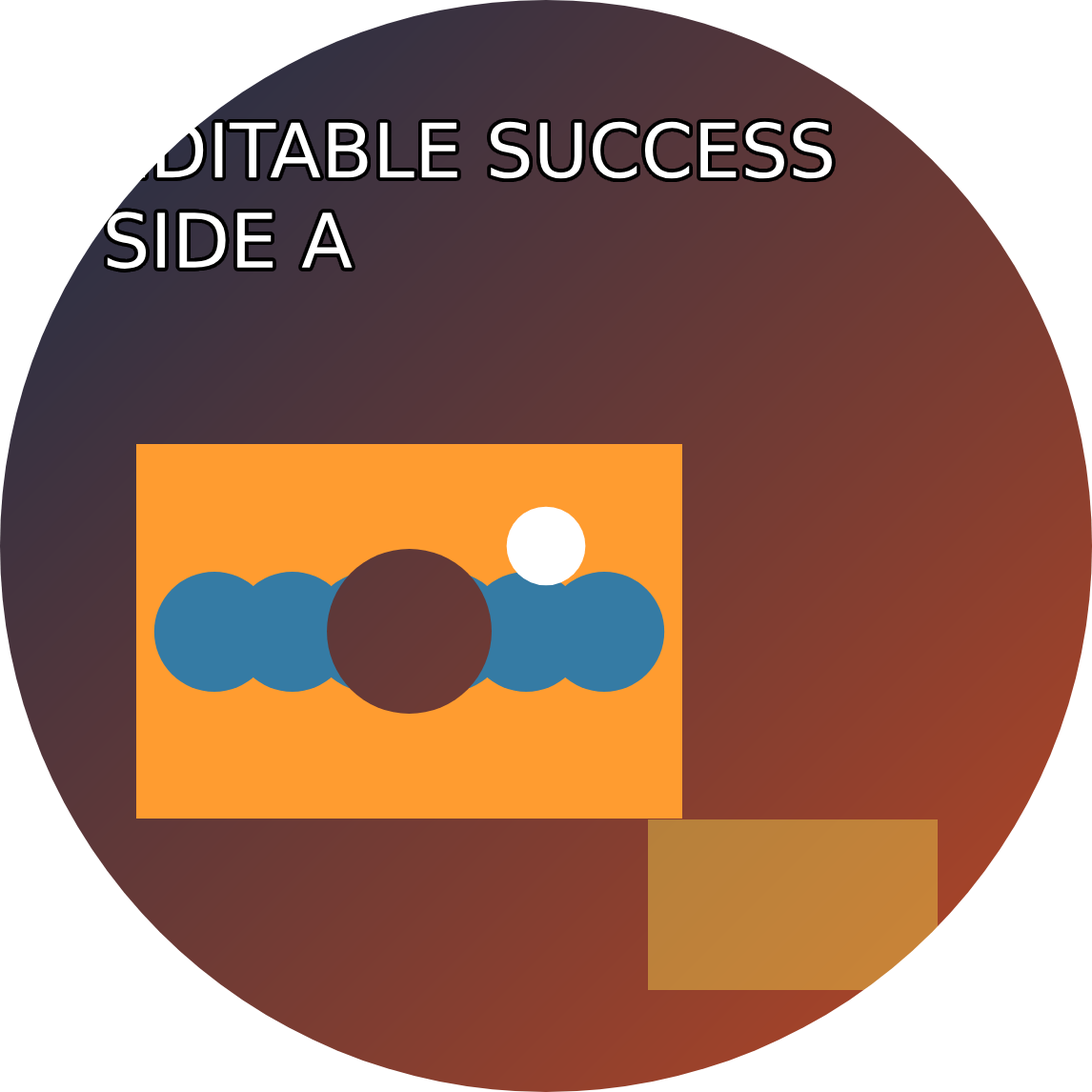
<style>
.page{position:relative;width:1092px;height:1092px;background:#ffffff}
.page>*{position:absolute;margin:0}
.t1{font:75.1px/90.1px "DejaVuSans";color:#ffffff}
</style>
<div class="page">
<p class="t1" style="left:107px;top:121px;width:725px;height:148px">EDITABLE SUCCESS<br>SIDE A</p>
</div>
